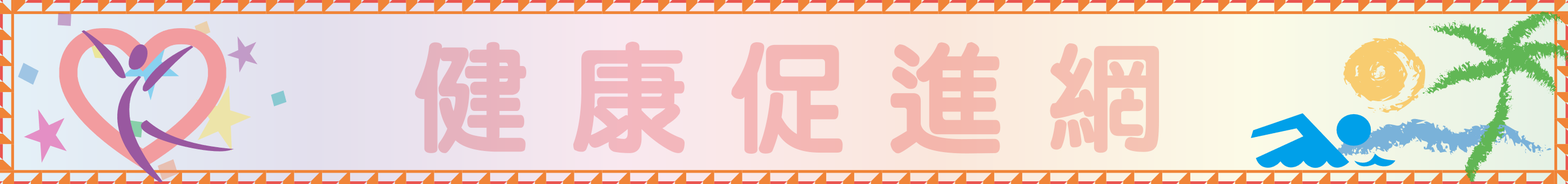
<style>
.page{position:relative;width:1568px;height:184px}
.page>*{position:absolute;margin:0}
.t1{font:118.9px "DFLiYuanStd-W8";color:#f4b7b6}
</style>
<div class="page">
<p class="t1" style="left:415px;top:41px;width:744px;height:112px">健 康 促 進 網</p>
</div>
